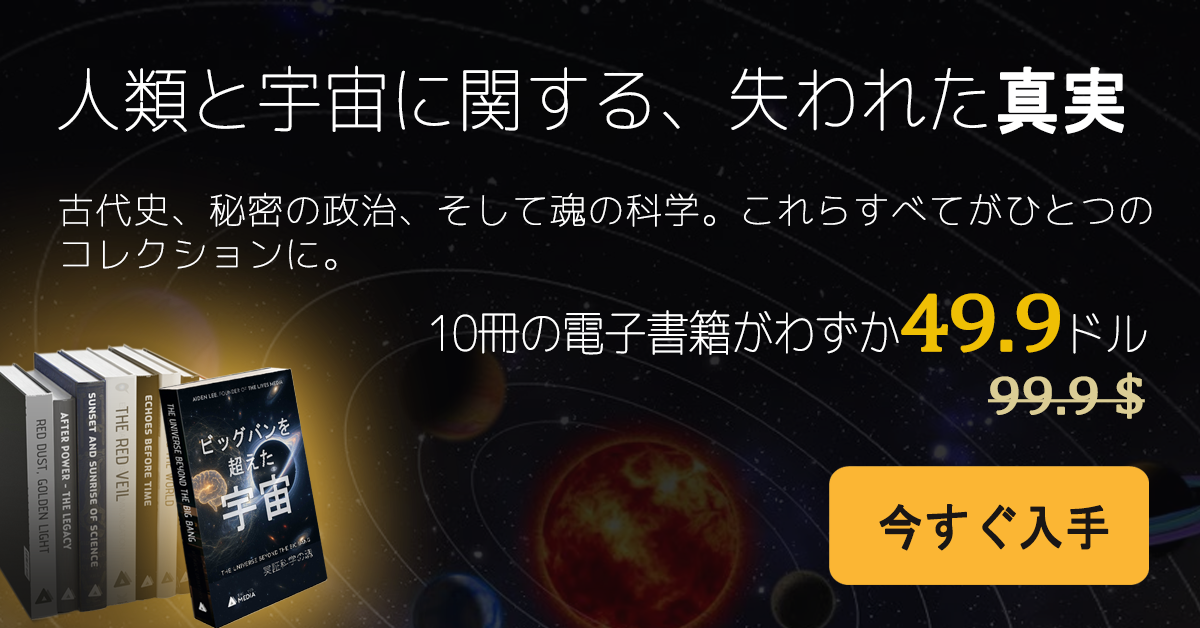
<style>
.page{position:relative;width:1200px;height:628px}
.page>*{position:absolute;margin:0}
.t1{font:71.5px "Chogokuboso-Gothic";letter-spacing:0.005em;color:#ffffff;font-weight:bold;scale:0.91 1}
.t2{font:71.5px "MS-Gothic";letter-spacing:0.005em;color:#ffffff;font-weight:bold;scale:0.91 1}
.t3{font:36px/44px "Chogokuboso-Gothic";letter-spacing:0.025em;color:#ffffff;font-weight:bold}
.t4{font:48px "Chogokuboso-Gothic";letter-spacing:-0.05em;color:#ffffff;font-weight:bold;scale:0.9 1}
.t5{font:82.8px "Cambria";letter-spacing:-0.05em;color:#efbf04;font-weight:bold;scale:1.11 1}
.t6{font:54px "Cambria";letter-spacing:-0.025em;color:#dbcd95;font-weight:bold;scale:1.11 1}
.t7{font:50.3px "MS-Gothic";letter-spacing:0.005em;color:#191616;font-weight:bold;scale:0.9 1}
</style>
<div class="page">
<p class="t1" style="left:58px;top:65px;width:1066px;height:70px">人類と宇宙に関する、失われた<span class="t2">真実</span></p>
<p class="t3" style="left:59px;top:192px;width:1093px;height:78px">古代史、秘密の政治、そして魂の科学。これらすべてがひとつのコレクションに。</p>
<p class="t4" style="left:431px;top:293px;width:716px;height:62px">10冊の電子書籍がわずか<span class="t5">49.9</span>ドル</p>
<p class="t6" style="left:988px;top:372px;width:157px;height:47px">99.9 $</p>
<p class="t7" style="left:879px;top:504px;width:230px;height:47px">今すぐ入手</p>
</div>
